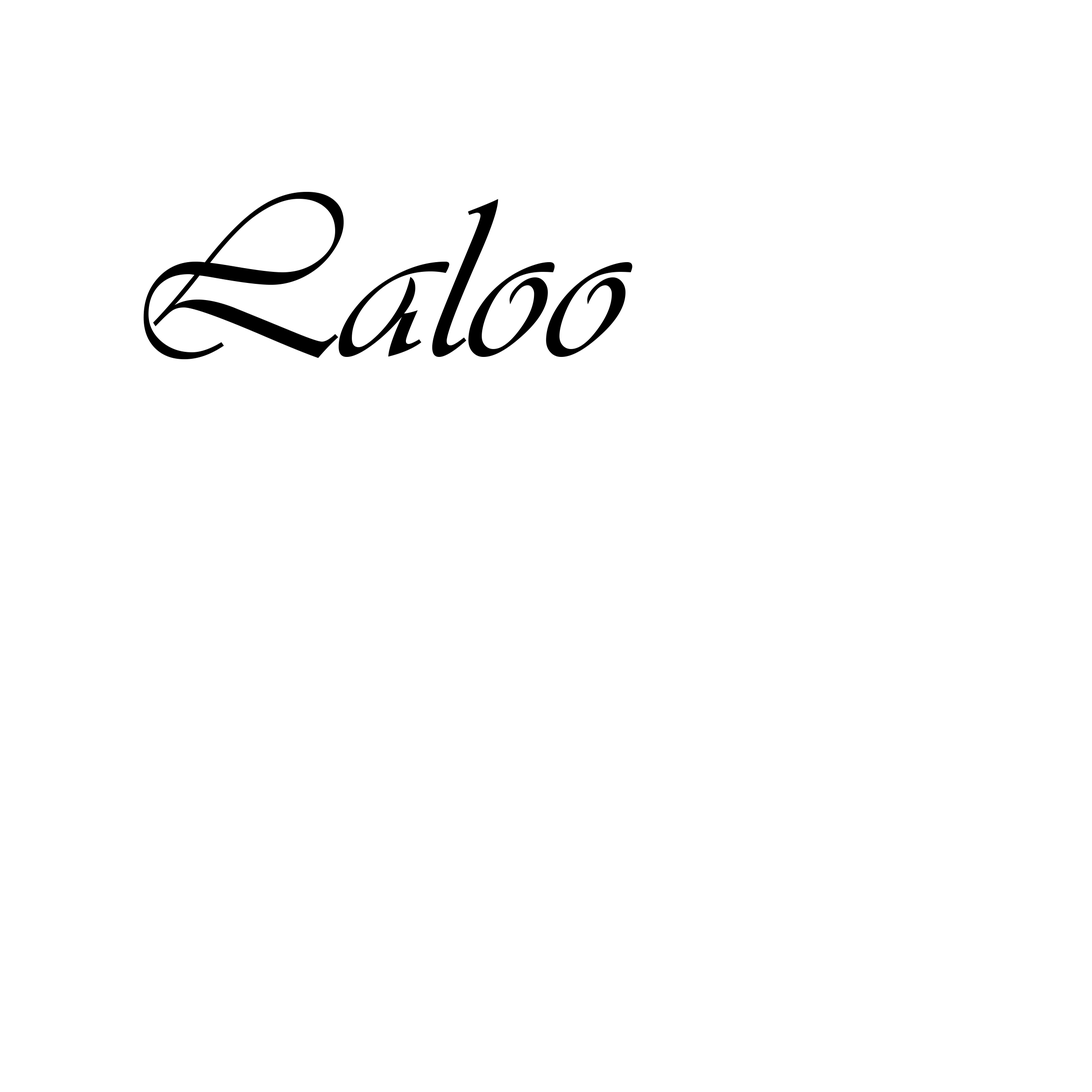
<style>
.page{position:relative;width:1092px;height:1092px;background:#ffffff}
.page>*{position:absolute;margin:0}
.t1{font:235px "Vivaldii";color:#000000}
</style>
<div class="page">
<p class="t1" style="left:143px;top:192px;width:489px;height:167px">Laloo</p>
</div>
